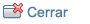
<style>
.page{position:relative;width:90px;height:24px;background:#ffffff}
.page>*{position:absolute;margin:0}
.t1{font:14px "ArialMT";color:#507ba0}
</style>
<div class="page">
<p class="t1" style="left:27px;top:6px;width:41px;height:12px">Cerrar</p>
</div>
